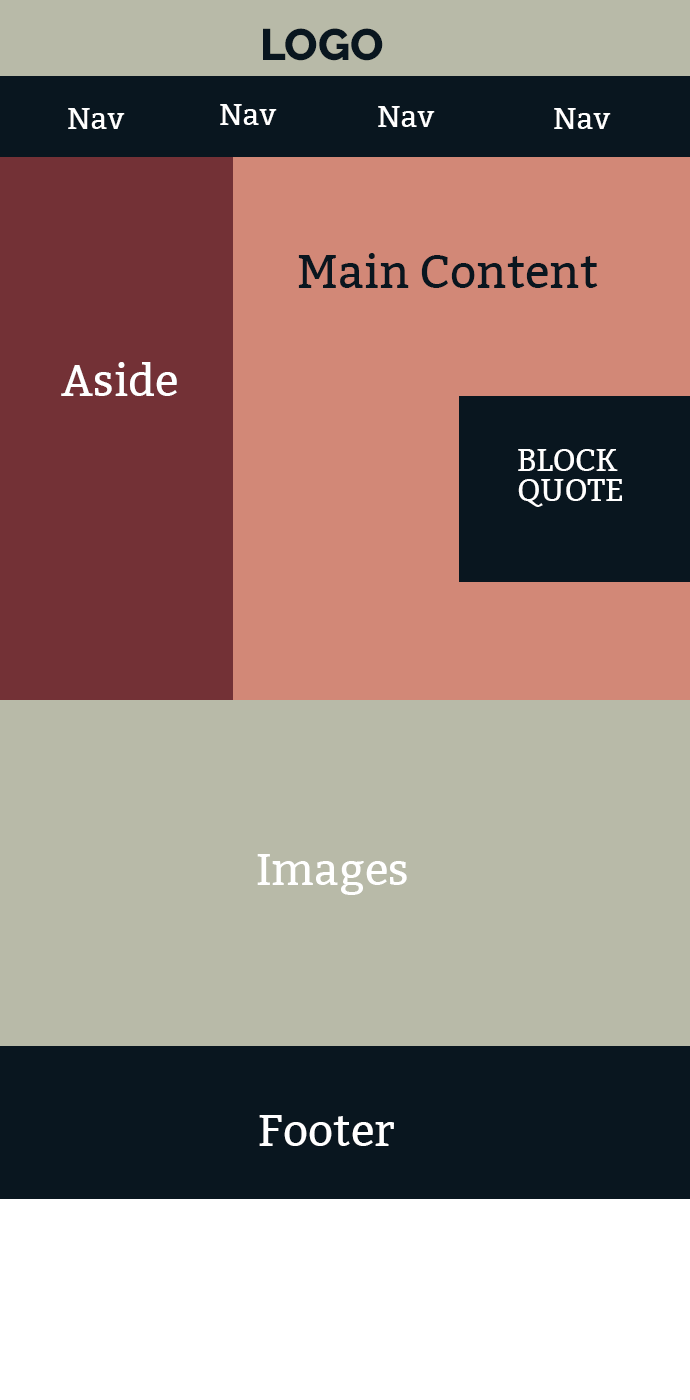
<style>
.page{position:relative;width:690px;height:1400px;background:#b8baa8}
.page>*{position:absolute;margin:0}
.t1{font:44px "Raleway-ExtraBold";color:#09161f}
.t2{font:30px "Bitter-Regular";color:#ffffff}
.t3{font:46px "Bitter-Regular";color:#09161f}
.t4{font:44px "Bitter-Regular";color:#ffffff}
.t5{font:30.5px/29.5px "Bitter-Regular";color:#ffffff}
</style>
<div class="page">
<p class="t1" style="left:263px;top:28px;width:120px;height:33px">LOGO</p>
<p class="t2" style="left:68px;top:108px;width:57px;height:21px">Nav</p>
<p class="t2" style="left:220px;top:104px;width:57px;height:21px">Nav</p>
<p class="t2" style="left:378px;top:106px;width:57px;height:21px">Nav</p>
<p class="t2" style="left:554px;top:108px;width:57px;height:21px">Nav</p>
<p class="t3" style="left:298px;top:253px;width:300px;height:35px">Main Content</p>
<p class="t4" style="left:61px;top:362px;width:116px;height:34px">Aside</p>
<p class="t5" style="left:518px;top:449px;width:104px;height:58px">BLOCK <br>QUOTE</p>
<p class="t4" style="left:257px;top:854px;width:150px;height:41px">Images</p>
<p class="t4" style="left:259px;top:1115px;width:135px;height:31px">Footer</p>
</div>
